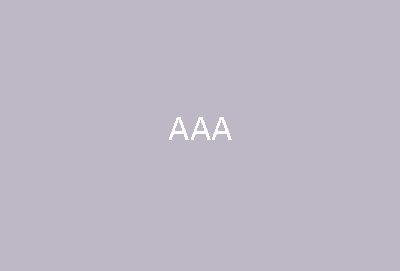
<style>
.page{position:relative;width:400px;height:271px;background:#beb8c6}
.page>*{position:absolute;margin:0}
.t1{font:37px "Calibri";letter-spacing:0.006em;color:#ffffff}
</style>
<div class="page">
<p class="t1" style="left:169px;top:117px;width:63px;height:23px">AAA</p>
</div>
